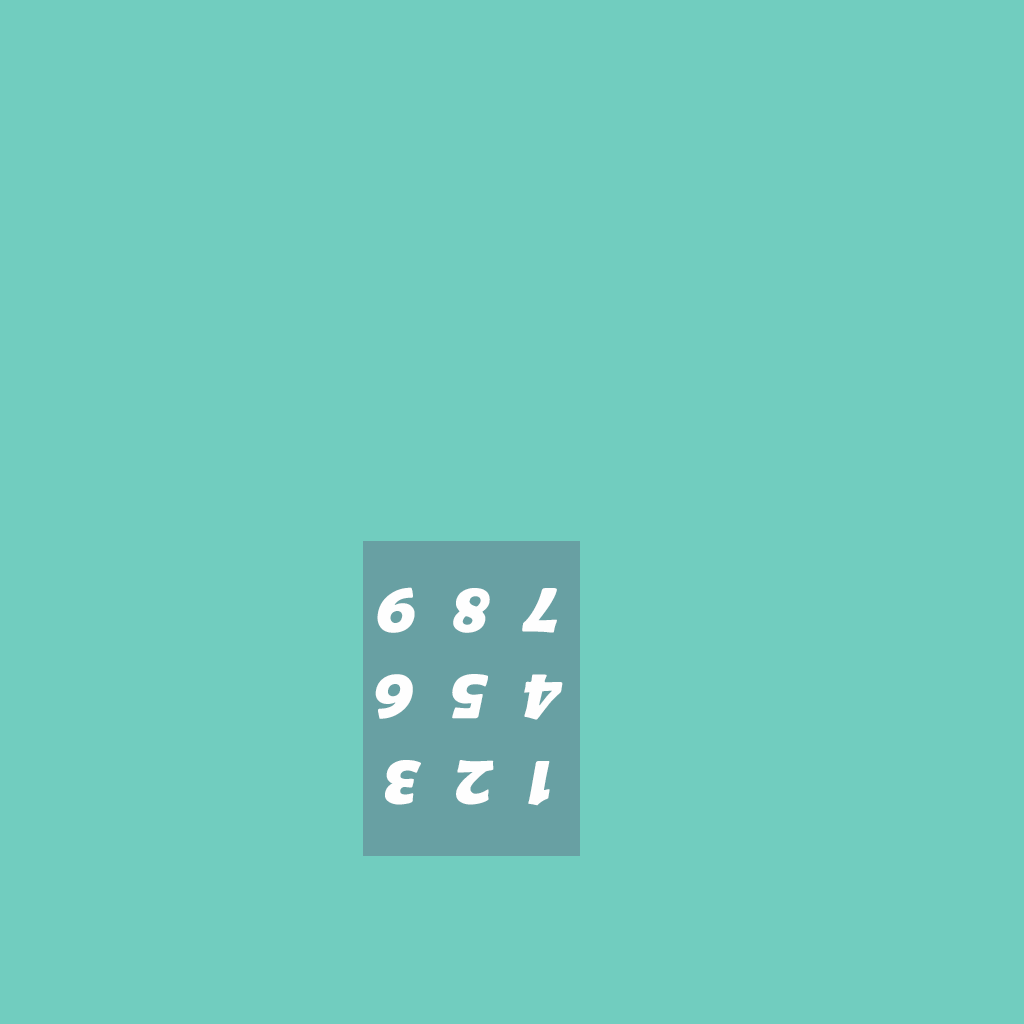
<style>
.page{position:relative;width:1024px;height:1024px;background:#71cdbf}
.page>*{position:absolute;margin:0}
.t1{font:72px "BerlinSansFBDemi-Bold";color:#fefefe;font-style:italic}
.t2{font:60px "CopperplateGothic-Bold";color:#fefefe;font-style:italic}
</style>
<div class="page">
<p class="t1" style="left:375px;top:587px;width:188px;height:219px;text-align:center;rotate:-180deg"><span class="t2"><br></span>1  2  3<br>4  5  6<br>7  8  9</p>
</div>
